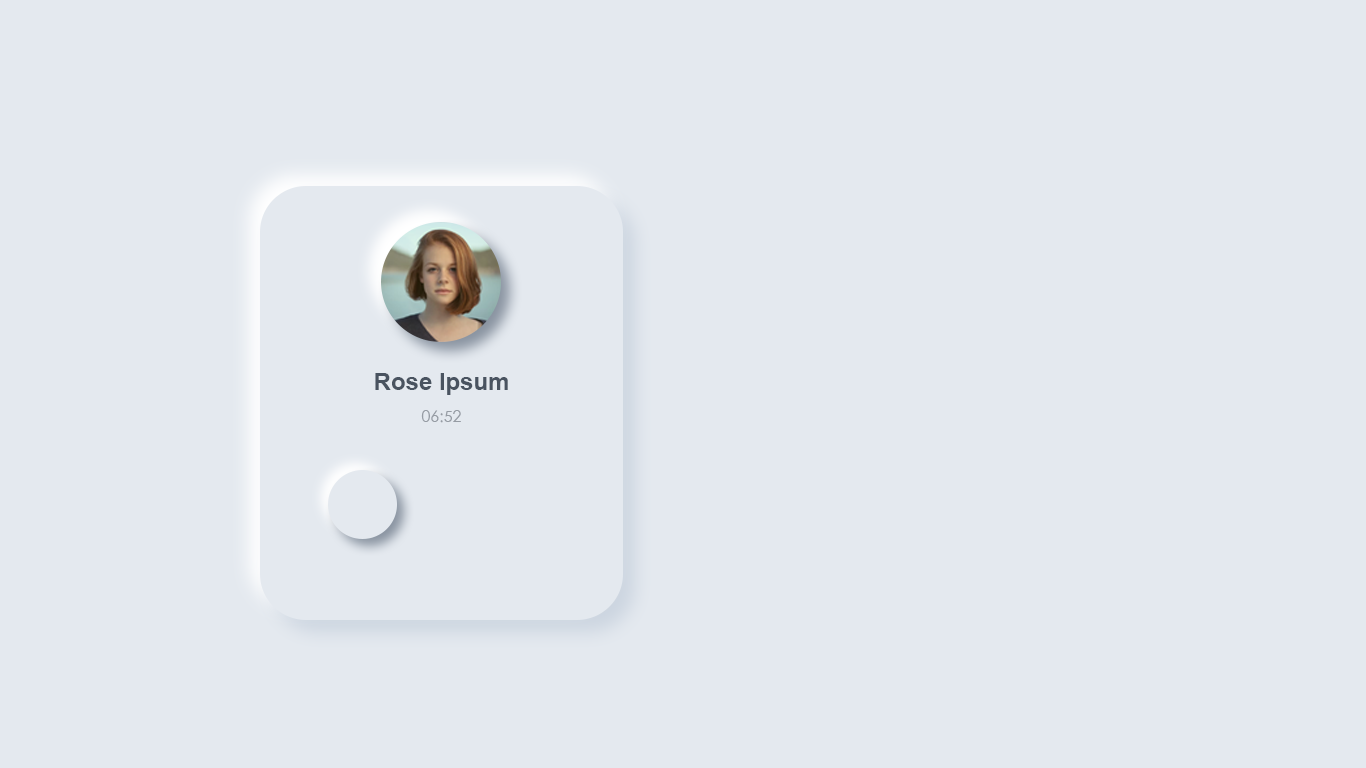
<style>
.page{position:relative;width:1366px;height:768px;background:#e4e9ef}
.page>*{position:absolute;margin:0}
.t1{font:24px "Arial-BoldMT";color:#495360}
.t2{font:16px "STHeiti";color:#969ca4}
</style>
<div class="page">
<p class="t1" style="left:375px;top:373px;width:133px;height:22px">Rose lpsum</p>
<p class="t2" style="left:421px;top:410px;width:40px;height:13px">06:52</p>
</div>
